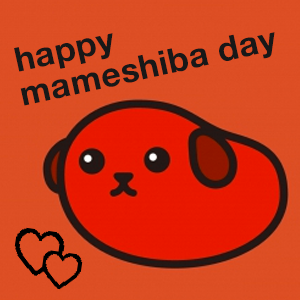
<style>
.page{position:relative;width:300px;height:300px;background:#dd4e24}
.page>*{position:absolute;margin:0}
.t1{font:33.7px "HelveticaNeue-Bold";letter-spacing:0.016em;color:#181818}
</style>
<div class="page">
<p class="t1" style="left:14px;top:33px;width:99px;height:39px;rotate:-13deg">happy</p>
<p class="t1" style="left:20px;top:32px;width:255px;height:74px;rotate:-13deg">mameshiba day</p>
</div>
